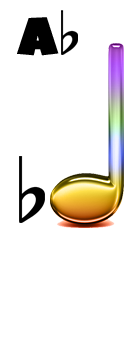
<style>
.page{position:relative;width:130px;height:350px;background:#ffffff}
.page>*{position:absolute;margin:0}
.t1{font:54px "LuckiestGuy-Regular";letter-spacing:0.005em;color:#000000;font-weight:bold;scale:1.11 1}
</style>
<div class="page">
<p class="t1" style="left:17px;top:17px;width:42px;height:39px">A</p>
</div>
